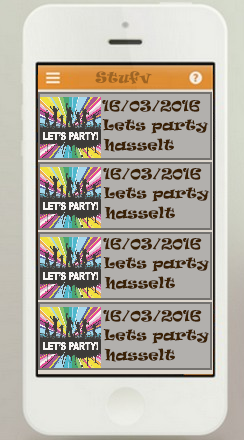
<style>
.page{position:relative;width:244px;height:440px}
.page>*{position:absolute;margin:0}
.t1{font:14px "Ravie";color:#9e6422}
.t2{font:14px "Ravie";color:#3a2106}
</style>
<div class="page">
<p class="t1" style="left:95px;top:71px;width:57px;height:14px">Stufv</p>
<p class="t2" style="left:102px;top:100px;width:99px;height:12px">16/03/2016</p>
<p class="t2" style="left:102px;top:119px;width:107px;height:15px">Lets party</p>
<p class="t2" style="left:103px;top:138px;width:71px;height:14px">hasselt</p>
<p class="t2" style="left:103px;top:168px;width:99px;height:12px">16/03/2016</p>
<p class="t2" style="left:103px;top:187px;width:107px;height:15px">Lets party</p>
<p class="t2" style="left:104px;top:206px;width:71px;height:14px">hasselt</p>
<p class="t2" style="left:103px;top:238px;width:99px;height:12px">16/03/2016</p>
<p class="t2" style="left:103px;top:257px;width:107px;height:15px">Lets party</p>
<p class="t2" style="left:104px;top:276px;width:71px;height:14px">hasselt</p>
<p class="t2" style="left:103px;top:310px;width:99px;height:12px">16/03/2016</p>
<p class="t2" style="left:103px;top:329px;width:107px;height:15px">Lets party</p>
<p class="t2" style="left:104px;top:348px;width:71px;height:14px">hasselt</p>
</div>
